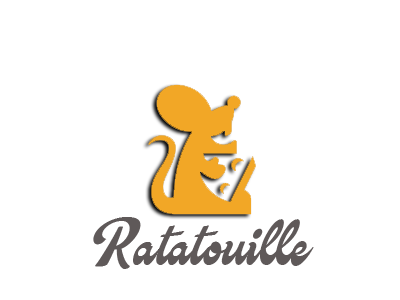
<style>
.page{position:relative;width:400px;height:300px;background:#ffffff}
.page>*{position:absolute;margin:0}
.t1{font:48px "CandyShopBlackPersonalUse";color:#5f5959}
</style>
<div class="page">
<p class="t1" style="left:93px;top:217px;width:221px;height:52px">Ratatouille</p>
</div>
